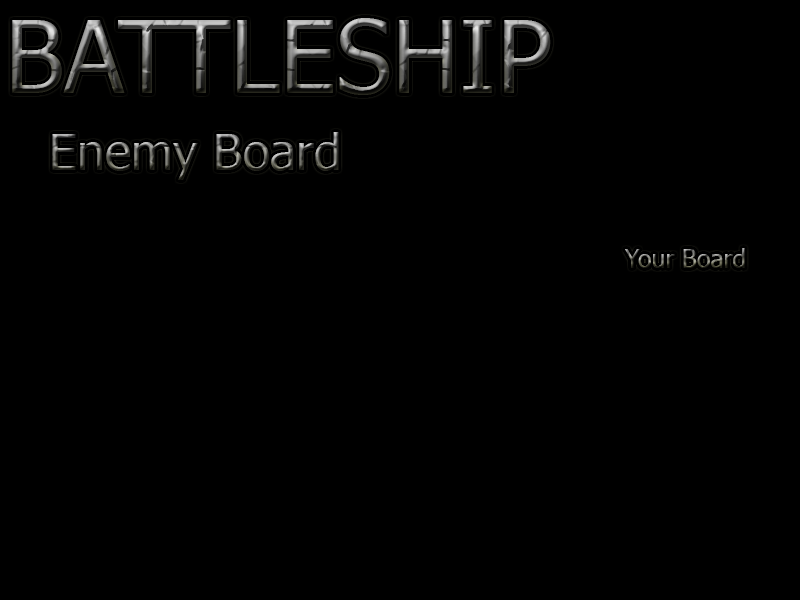
<style>
.page{position:relative;width:800px;height:600px;background:#000000}
.page>*{position:absolute;margin:0}
.t1{font:100px "Tahoma"}
.t2{font:50px "Tahoma"}
.t3{font:25px "Tahoma"}
</style>
<div class="page">
<p class="t1" style="left:12px;top:18px;width:539px;height:77px">BATTLESHIP</p>
<p class="t2" style="left:52px;top:132px;width:287px;height:48px">Enemy Board</p>
<p class="t3" style="left:625px;top:248px;width:120px;height:20px">Your Board</p>
</div>
